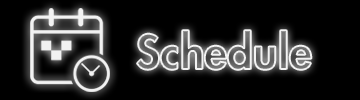
<style>
.page{position:relative;width:360px;height:100px;background:#000000}
.page>*{position:absolute;margin:0}
.t1{font:45.8px "FuturaStd-Heavy"}
</style>
<div class="page">
<p class="t1" style="left:137px;top:30px;width:175px;height:40px">Schedule</p>
</div>
